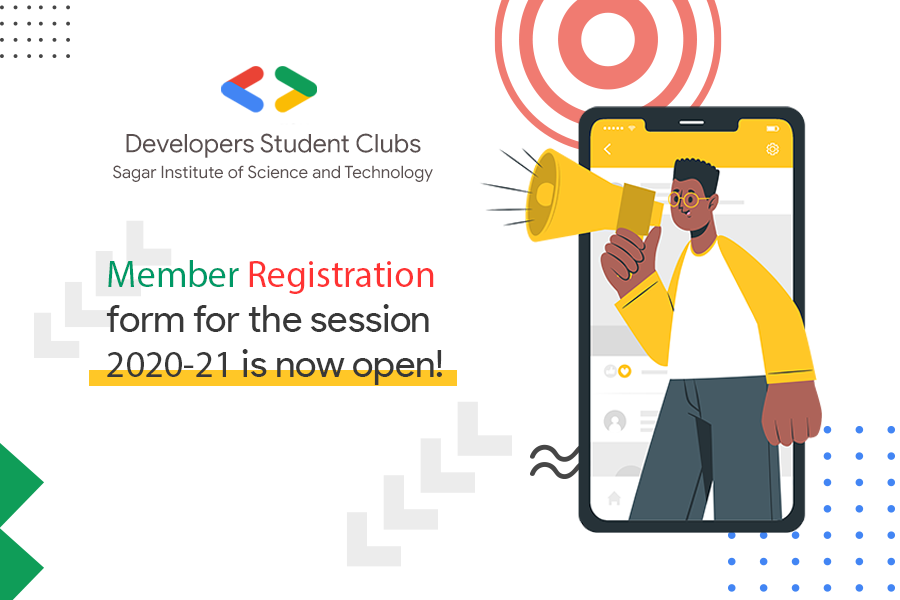
<style>
.page{position:relative;width:900px;height:600px;background:#ffffff}
.page>*{position:absolute;margin:0}
.t1{font:17.1px/25.6px "GoogleSans-Regular";color:#5a5050}
.t2{font:25.6px/25.6px "GoogleSans-Regular";color:#5a5050}
.t3{font:37.5px "ProductSans-Regular";color:#383838}
.t4{font:37.5px "MyriadPro-Regular";color:#009966}
.t5{font:37.5px "MyriadPro-Regular";color:#ff3333}
.t6{font:37.5px "MyriadPro-Regular";color:#383838}
</style>
<div class="page">
<p class="t1" style="left:113px;top:133px;width:320px;height:49px;text-align:center"><span class="t2">Developers Student Clubs<br></span>Sagar Institute of Science and Technology</p>
<p class="t3" style="left:106px;top:260px;width:336px;height:125px"><span class="t4">Member </span><span class="t5">Registration<br></span>form for the session<br><span class="t6">2020-21 </span>is now open!</p>
</div>
